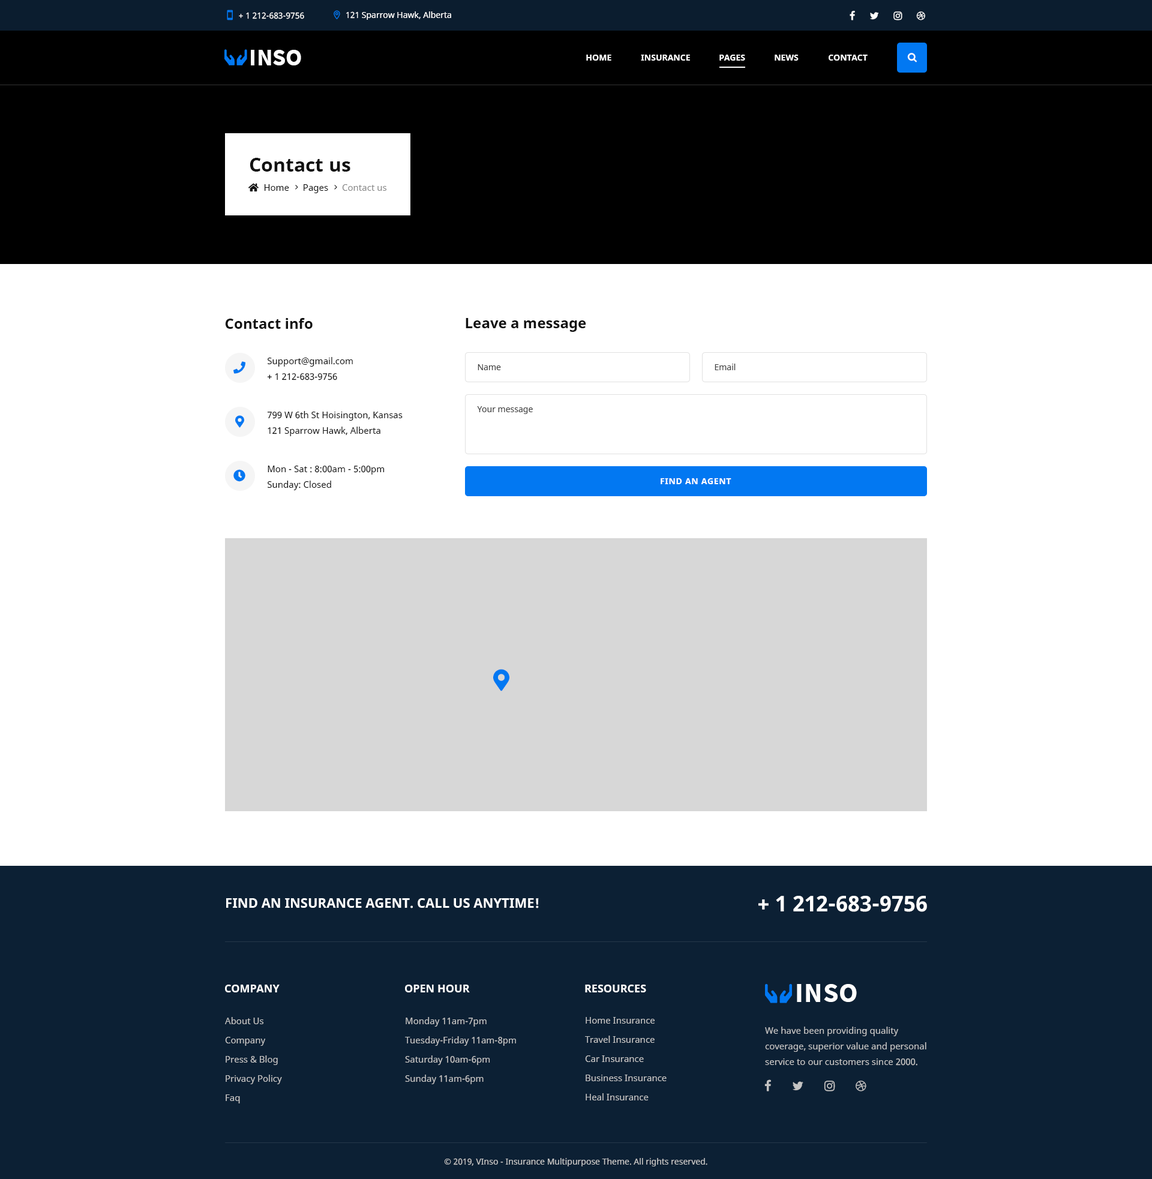
<style>
.page{position:relative;width:1152px;height:1179px;background:#ffffff}
.page>*{position:absolute;margin:0}
.t1{font:8.4px "NotoSans";color:#ffffff}
.t2{font:24px "SourceSansPro-Bold";color:#ffffff;text-transform:uppercase}
.t3{font:8.4px "NotoSans-Bold";color:#ffffff;text-transform:uppercase}
.t4{font:19.2px "NotoSans-Bold";color:#111111}
.t5{font:14.4px "NotoSans-Bold";color:#111111}
.t6{font:9px/15.6px "NotoSans";color:#111111}
.t7{font:8.4px "NotoSans";color:#444444}
.t8{font:8.4px "NotoSans-Bold";letter-spacing:0.05em;color:#ffffff;text-transform:uppercase}
.t9{font:13.2px "NotoSans-Bold";color:#ffffff;text-transform:uppercase}
.t10{font:21.6px "NotoSans-Bold";color:#ffffff;text-transform:uppercase}
.t11{font:10.8px "NotoSans-Bold";color:#ffffff}
.t12{font:10.8px "NotoSans-Bold";color:#ffffff;text-transform:uppercase}
.t13{font:27.6px "SourceSansPro-Bold";letter-spacing:0.025em;color:#ffffff;text-transform:uppercase}
.t14{font:9px/19.2px "NotoSans";color:#c4c4c4}
.t15{font:9px/15.6px "NotoSans";color:#c4c4c4}
.t16{font:8.4px "NotoSans";color:#c4c4c4}
</style>
<div class="page">
<p class="t1" style="left:239px;top:12px;width:65px;height:7px">+ 1 212-683-9756</p>
<p class="t1" style="left:346px;top:11px;width:105px;height:9px">121 Sparrow Hawk, Alberta</p>
<p class="t2" style="left:251px;top:50px;width:50px;height:15px">inso</p>
<p class="t3" style="left:586px;top:55px;width:25px;height:6px">Home</p>
<p class="t3" style="left:641px;top:55px;width:49px;height:6px">Insurance</p>
<p class="t3" style="left:719px;top:55px;width:26px;height:6px">Pages</p>
<p class="t3" style="left:775px;top:55px;width:24px;height:6px">News</p>
<p class="t3" style="left:829px;top:55px;width:39px;height:6px">COntact</p>
<p class="t4" style="left:250px;top:158px;width:100px;height:14px">Contact us</p>
<p class="t5" style="left:225px;top:318px;width:88px;height:11px">Contact info</p>
<p class="t5" style="left:466px;top:318px;width:120px;height:14px">Leave a message</p>
<p class="t6" style="left:267px;top:357px;width:86px;height:23px">Support@gmail.com<br>+ 1 212-683-9756</p>
<p class="t7" style="left:478px;top:364px;width:23px;height:6px">Name</p>
<p class="t7" style="left:715px;top:364px;width:21px;height:6px">Email</p>
<p class="t6" style="left:267px;top:411px;width:136px;height:25px">799 W 6th St Hoisington, Kansas<br>121 Sparrow Hawk, Alberta</p>
<p class="t7" style="left:477px;top:406px;width:56px;height:8px">Your message</p>
<p class="t6" style="left:267px;top:466px;width:118px;height:24px">Mon - Sat : 8:00am - 5:00pm<br>Sunday: Closed</p>
<p class="t8" style="left:661px;top:478px;width:70px;height:6px">Find an agent</p>
<p class="t9" style="left:226px;top:898px;width:313px;height:10px">Find an Insurance agent. Call us anytime!</p>
<p class="t10" style="left:758px;top:896px;width:169px;height:16px">+ 1 212-683-9756</p>
<p class="t11" style="left:225px;top:985px;width:55px;height:7px">COMPANY</p>
<p class="t12" style="left:405px;top:985px;width:65px;height:7px">Open hour</p>
<p class="t12" style="left:585px;top:985px;width:61px;height:7px">RESOURCES</p>
<p class="t13" style="left:797px;top:984px;width:60px;height:18px">Inso</p>
<p class="t14" style="left:225px;top:1017px;width:57px;height:86px">About Us<br>Company<br>Press &amp; Blog<br>Privacy Policy<br>Faq</p>
<p class="t14" style="left:405px;top:1017px;width:111px;height:67px">Monday 11am-7pm<br>Tuesday-Friday 11am-8pm<br>Saturday 10am-6pm<br>Sunday 11am-6pm</p>
<p class="t14" style="left:585px;top:1017px;width:82px;height:83px">Home Insurance<br>Travel Insurance<br>Car Insurance<br>Business Insurance<br>Heal Insurance</p>
<p class="t15" style="left:765px;top:1027px;width:161px;height:39px">We have been providing quality coverage, superior value and personal service to our customers since 2000.</p>
<p class="t16" style="left:444px;top:1158px;width:263px;height:8px">© 2019, VInso - Insurance Multipurpose Theme. All rights reserved.</p>
</div>
